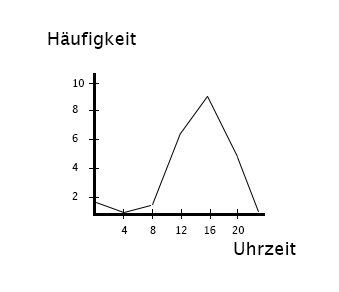
<style>
.page{position:relative;width:339px;height:292px;background:#ffffff}
.page>*{position:absolute;margin:0}
.t1{font:18px "LucidaGrande";color:#000000}
.t2{font:10px "LucidaGrande";color:#000000}
</style>
<div class="page">
<p class="t1" style="left:48px;top:32px;width:88px;height:17px">Häufigkeit</p>
<p class="t2" style="left:73px;top:79px;width:11px;height:8px">10</p>
<p class="t2" style="left:72px;top:105px;width:6px;height:8px">8</p>
<p class="t2" style="left:72px;top:134px;width:6px;height:8px">6</p>
<p class="t2" style="left:72px;top:163px;width:6px;height:8px">4</p>
<p class="t2" style="left:72px;top:192px;width:6px;height:8px">2</p>
<p class="t2" style="left:121px;top:226px;width:123px;height:8px">4       8      12     16     20</p>
<p class="t1" style="left:234px;top:242px;width:62px;height:13px">Uhrzeit</p>
</div>
